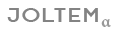
<style>
.page{position:relative;width:115px;height:30px;background:#ffffff}
.page>*{position:absolute;margin:0}
.t1{font:20.2px "Opificio-Bold";letter-spacing:0.1em;color:#838383;scale:1.12 1}
.t2{font:18px "MinionPro-Bold";letter-spacing:0.1em;color:#999999}
</style>
<div class="page">
<p class="t1" style="left:7px;top:8px;width:91px;height:14px">JOLTEM</p>
<p class="t2" style="left:101px;top:19px;width:10px;height:8px">α</p>
</div>
